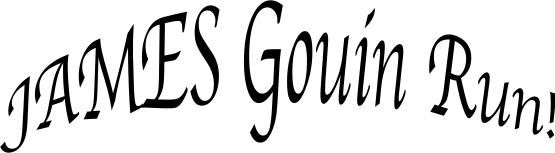
<style>
.page{position:relative;width:555px;height:153px;background:#ffffff}
.page>*{position:absolute;margin:0}
.t1{font:63.9px "Apple-Chancery";color:#000000}
</style>
<div class="page">
<p class="t1" style="left:0px;top:0px;width:556px;height:153px">JAMES Gouin Run!</p>
</div>
